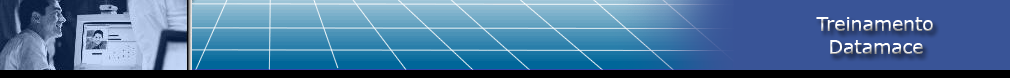
<style>
.page{position:relative;width:1010px;height:78px}
.page>*{position:absolute;margin:0}
.t1{font:18.8px "Verdana"}
</style>
<div class="page">
<p class="t1" style="left:816px;top:17px;width:117px;height:37px;text-align:center">Treinamento<br>Datamace</p>
</div>
